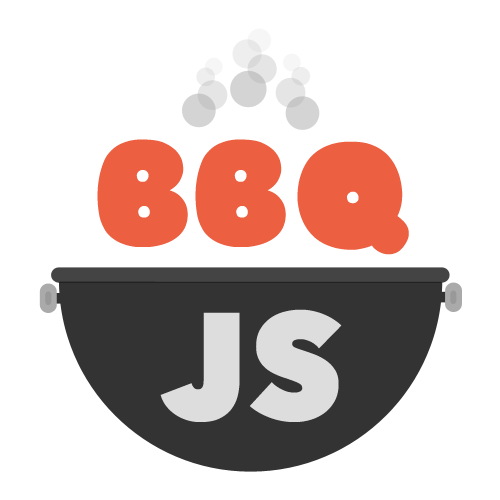
<style>
.page{position:relative;width:500px;height:500px;background:#ffffff}
.page>*{position:absolute;margin:0}
.t1{font:150px "Sniglet-Regular";letter-spacing:-0.01em;color:#ec5f40}
.t2{font:150px "AvenirNext-Heavy";color:#dddddd}
</style>
<div class="page">
<p class="t1" style="left:97px;top:139px;width:312px;height:116px">BBQ</p>
<p class="t2" style="left:160px;top:309px;width:182px;height:113px">JS</p>
</div>
